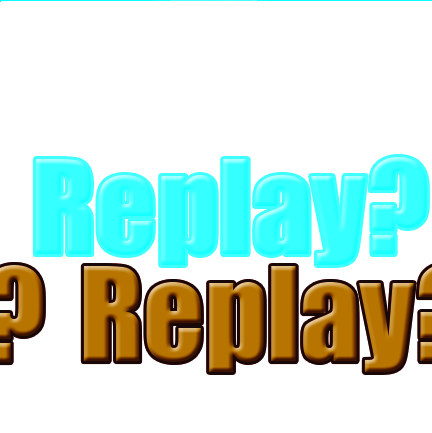
<style>
.page{position:relative;width:432px;height:433px;background:#ffffff}
.page>*{position:absolute;margin:0}
.t1{font:120px "Impact";color:#35ffff}
</style>
<div class="page">
<p class="t1" style="left:35px;top:156px;width:392px;height:108px">Replay?</p>
</div>
